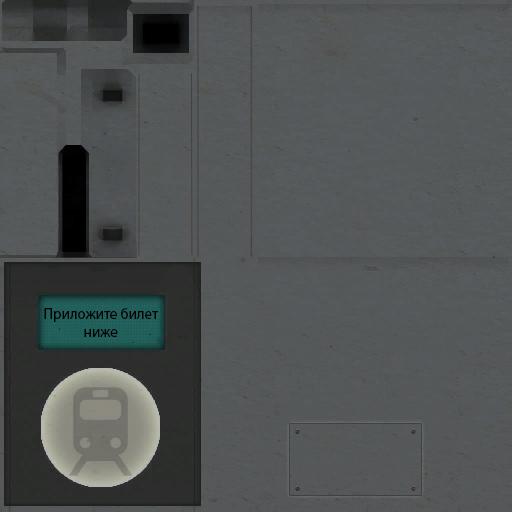
<style>
.page{position:relative;width:512px;height:512px;background:#55595b}
.page>*{position:absolute;margin:0}
.t1{font:15px "MyriadPro-Regular";color:#000000}
</style>
<div class="page">
<p class="t1" style="left:44px;top:308px;width:115px;height:29px;text-align:center">Приложите билет<br>ниже</p>
</div>
